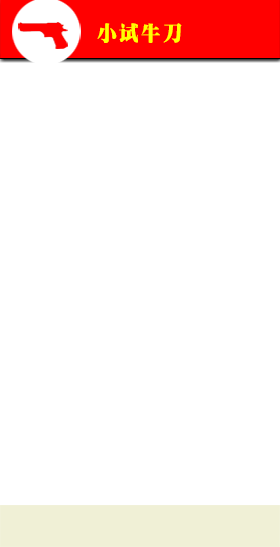
<style>
.page{position:relative;width:280px;height:547px;background:#ffffff}
.page>*{position:absolute;margin:0}
.t1{font:22.2px "RS_CuBiao";letter-spacing:0.05em;color:#ffff00;scale:0.94 1}
</style>
<div class="page">
<p class="t1" style="left:97px;top:23px;width:85px;height:20px">小试牛刀</p>
</div>
